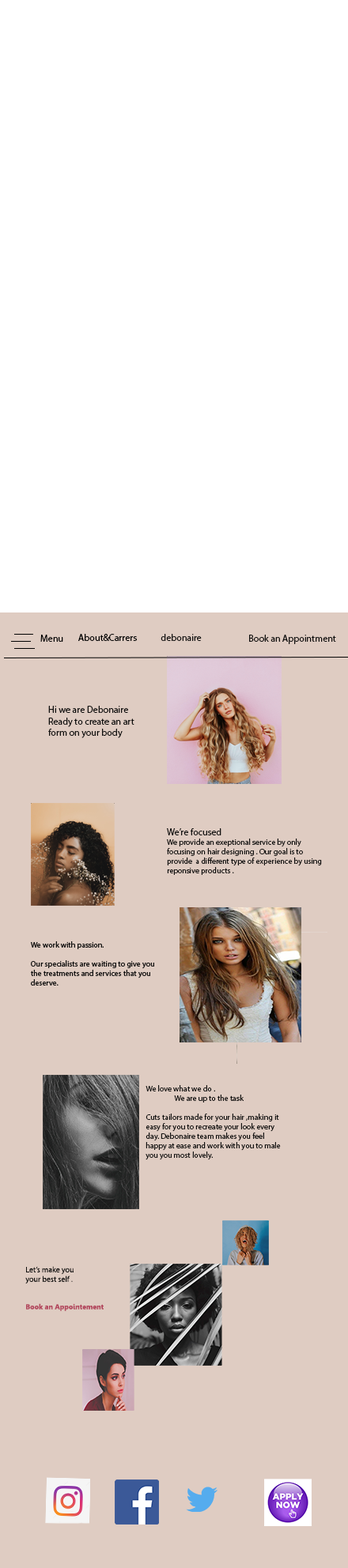
<style>
.page{position:relative;width:348px;height:1568px;background:#dfccc2}
.page>*{position:absolute;margin:0}
.t1{font:9.5px "MyriadPro-Regular";color:#000000}
.t2{font:9.5px "MyriadPro-Regular";color:#121110}
.t3{font:7.9px "MyriadPro-Regular";color:#121110}
.t4{font:7.1px "Leelawadee-Bold";color:#b3475e}
</style>
<div class="page">
<p class="t1" style="left:40px;top:635px;width:23px;height:7px">Menu</p>
<p class="t1" style="left:78px;top:634px;width:59px;height:7px">About&amp;Carrers</p>
<p class="t2" style="left:160px;top:634px;width:42px;height:7px">debonaire</p>
<p class="t2" style="left:249px;top:635px;width:87px;height:9px">Book an Appointment</p>
<p class="t2" style="left:48px;top:706px;width:86px;height:32px">Hi we are Debonaire<br>Ready to create an art<br>form on your body</p>
<p class="t3" style="left:167px;top:828px;width:155px;height:47px"><span class="t2">We’re focused<br></span>We provide an exeptional service by only <br>focusing on hair designing . Our goal is to provide  a different type of experience by using <br>reponsive products .</p>
<p class="t3" style="left:145px;top:1085px;width:136px;height:75px">We love what we do .<br> We are up to the task<br><br>Cuts tailors made for your hair ,making it<br>easy for you to recreate your look every<br>day. Debonaire team makes you feel<br>happy at ease and work with you to male<br>you you most lovely.</p>
<p class="t3" style="left:25px;top:1266px;width:79px;height:45px">Let’s make you<br>your best self . <br><br><br><span class="t4">Book an Appointement</span></p>
</div>
